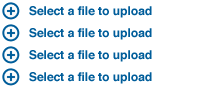
<style>
.page{position:relative;width:200px;height:88px;background:#ffffff}
.page>*{position:absolute;margin:0}
.t1{font:12px/22px "Helvetica-Bold";color:#005d9a}
</style>
<div class="page">
<p class="t1" style="left:29px;top:6px;width:123px;height:78px">Select a file to upload<br>Select a file to upload<br>Select a file to upload<br>Select a file to upload</p>
</div>
